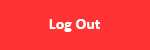
<style>
.page{position:relative;width:150px;height:50px;background:#ff3333}
.page>*{position:absolute;margin:0}
.t1{font:16px "Calibri-Bold";color:#ffffff}
</style>
<div class="page">
<p class="t1" style="left:49px;top:19px;width:51px;height:13px">Log Out</p>
</div>
